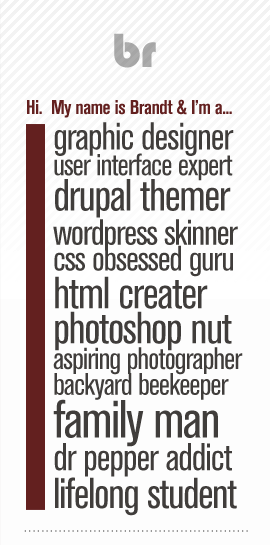
<style>
.page{position:relative;width:270px;height:545px;background:#fdfdfd}
.page>*{position:absolute;margin:0}
.t1{font:50px "Bauhaus93";letter-spacing:-0.025em;color:#adadad}
.t2{font:20px "AkzidenzGroteskBE-BoldCn";letter-spacing:-0.025em;color:#63201f}
.t3{font:30.9px/25.7px "AkzidenzGroteskBE-Cn";letter-spacing:-0.025em;color:#403d3b}
.t4{font:25.7px/37.7px "AkzidenzGroteskBE-BoldCn";letter-spacing:-0.025em;color:#63201f}
.t5{font:38.6px/37.7px "AkzidenzGroteskBE-Cn";letter-spacing:-0.025em;color:#403d3b}
.t6{font:44.6px/35.1px "AkzidenzGroteskBE-Cn";letter-spacing:-0.025em;color:#403d3b}
.t7{font:36px/34.3px "AkzidenzGroteskBE-Cn";letter-spacing:-0.025em;color:#403d3b}
.t8{font:35.1px/25.7px "AkzidenzGroteskBE-Cn";letter-spacing:-0.025em;color:#403d3b}
.t9{font:44.6px/37.7px "AkzidenzGroteskBE-Cn";letter-spacing:-0.025em;color:#403d3b}
.t10{font:53.1px/42.9px "AkzidenzGroteskBE-Cn";letter-spacing:-0.025em;color:#403d3b}
.t11{font:38.6px/32.6px "AkzidenzGroteskBE-Cn";letter-spacing:-0.025em;color:#403d3b}
.t12{font:42.9px/37.7px "AkzidenzGroteskBE-Cn";letter-spacing:-0.025em;color:#403d3b}
.t13{font:21px "AkzidenzGroteskBE-LightEx";letter-spacing:-0.025em;color:#989898;scale:0.84 1}
</style>
<div class="page">
<p class="t1" style="left:114px;top:33px;width:42px;height:35px">br</p>
<p class="t2" style="left:27px;top:99px;width:205px;height:19px">Hi.  My name is Brandt &amp; I’m a...</p>
<p class="t3" style="left:53px;top:122px;width:190px;height:394px"><span class="t4"><br></span><span class="t5">graphic designer  <br></span>user interface expert<br><span class="t6">drupal themer<br></span><span class="t7">wordpress skinner<br></span><span class="t8">css obsessed guru<br></span><span class="t9">html creater<br></span><span class="t6">photoshop nut<br></span>aspiring photographer<br>backyard beekeeper<br><span class="t10">family man<br></span><span class="t11">dr pepper addict<br></span><span class="t12">lifelong student</span></p>
<p class="t13" style="left:24px;top:530px;width:224px;height:2px">....................................................</p>
</div>
